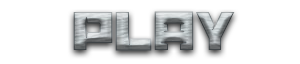
<style>
.page{position:relative;width:300px;height:64px;background:#ffffff}
.page>*{position:absolute;margin:0}
.t1{font:60px "BananaBrick"}
</style>
<div class="page">
<p class="t1" style="left:73px;top:11px;width:162px;height:40px">Play</p>
</div>
